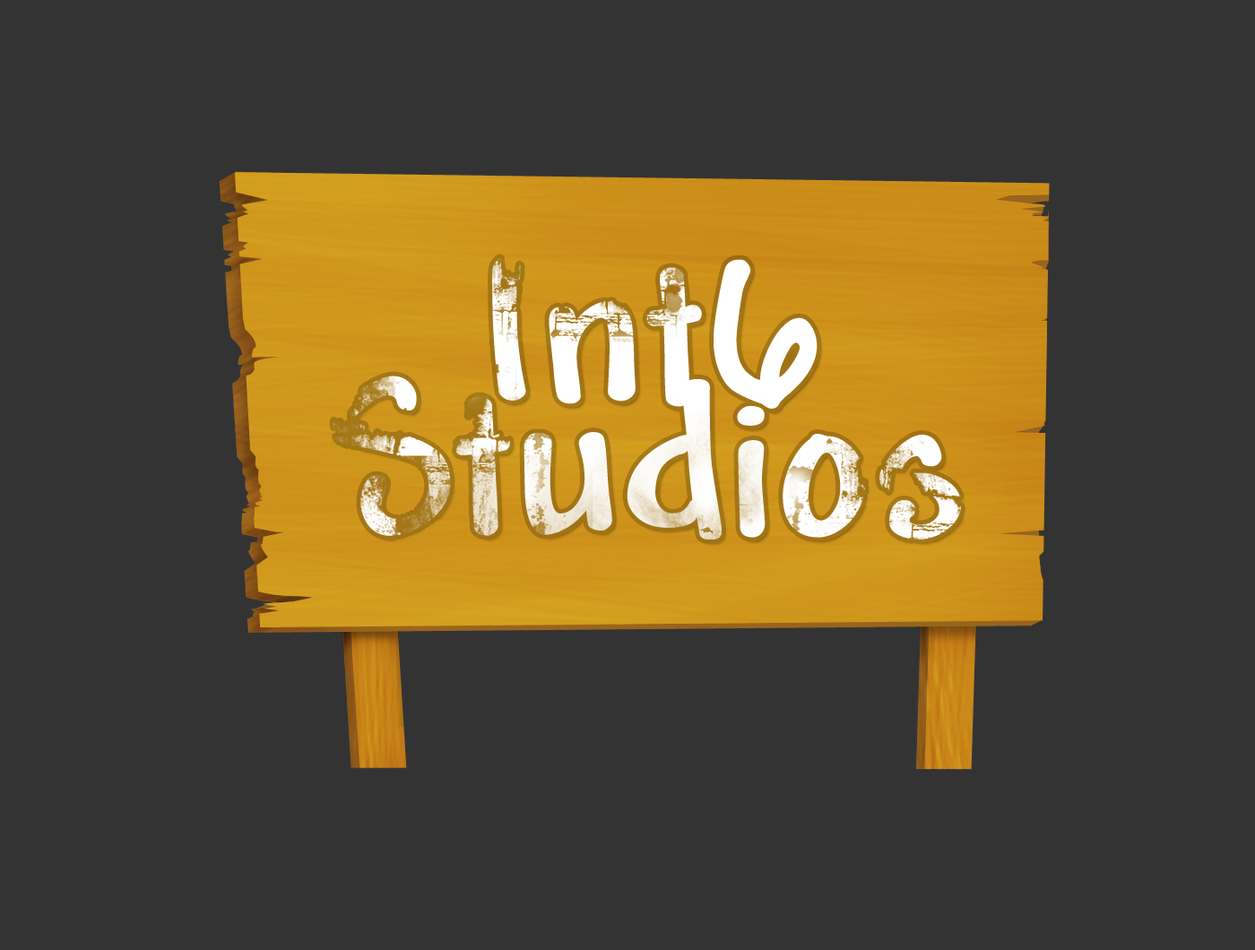
<style>
.page{position:relative;width:1255px;height:950px;background:#333333}
.page>*{position:absolute;margin:0}
.t1{font:224.1px/131.3px "Andy-Bold"}
</style>
<div class="page">
<p class="t1" style="left:333px;top:256px;width:628px;height:284px;text-align:center;rotate:1deg">Int6<br>Studios</p>
</div>
